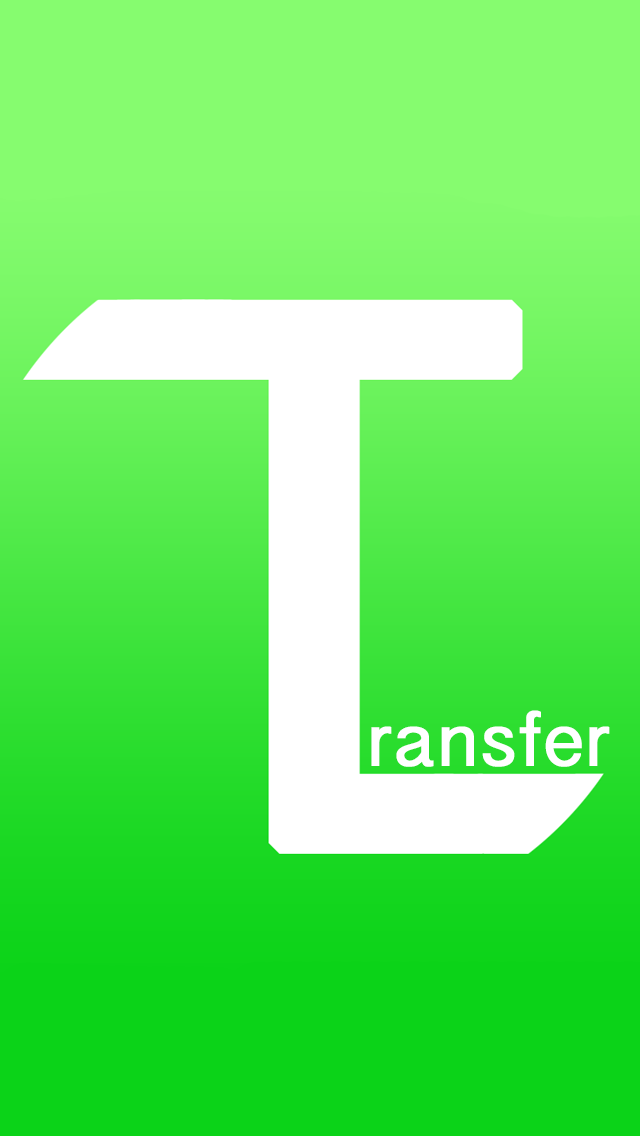
<style>
.page{position:relative;width:640px;height:1136px}
.page>*{position:absolute;margin:0}
.t1{font:75px "DevanagariSangamMN";color:#ffffff;font-weight:bold}
</style>
<div class="page">
<p class="t1" style="left:371px;top:710px;width:239px;height:57px">ransfer</p>
</div>
